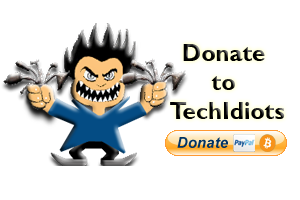
<style>
.page{position:relative;width:300px;height:200px;background:#ffffff}
.page>*{position:absolute;margin:0}
.t1{font:24px "GillSansMT-Bold";color:#000000}
</style>
<div class="page">
<p class="t1" style="left:170px;top:44px;width:115px;height:75px;text-align:center">Donate <br>to <br>TechIdiots</p>
</div>
